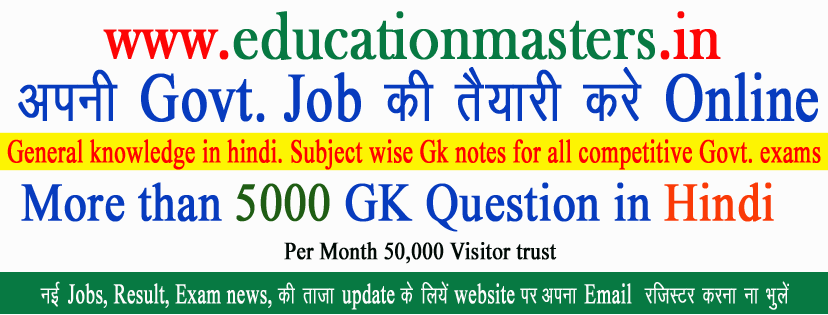
<style>
.page{position:relative;width:828px;height:315px;background:#fcfcfc}
.page>*{position:absolute;margin:0}
.t1{font:68.8px "BaskOldFace";color:#077942;font-weight:bold;scale:0.85 1}
.t2{font:68.8px "BaskOldFace";color:#fd0505;font-weight:bold;scale:0.85 1}
.t3{font:68.8px "KrutiDev010";color:#073bbe;font-weight:bold;scale:0.78 1}
.t4{font:68.8px "TimesNewRomanPSMT";color:#073bbe;font-weight:bold;scale:0.78 1}
.t5{font:32.8px "TimesNewRomanPSMT";color:#ff0000;font-weight:bold;scale:0.7 1}
.t6{font:54.1px "TimesNewRomanPSMT";color:#073bbe;font-weight:bold;scale:0.85 1}
.t7{font:54.1px "TimesNewRomanPSMT";color:#1f5d14;font-weight:bold;scale:0.85 1}
.t8{font:54.1px "TimesNewRomanPSMT";color:#fa3a07;font-weight:bold;scale:0.85 1}
.t9{font:24.6px "TimesNewRomanPSMT";color:#010a06;font-weight:bold;scale:0.85 1}
.t10{font:28.2px "TimesNewRomanPSMT";color:#fcfbfb;font-weight:bold;scale:0.67 1}
.t11{font:28.2px "KrutiDev010";color:#fcfbfb;font-weight:bold;scale:0.67 1}
</style>
<div class="page">
<p class="t1" style="left:103px;top:11px;width:618px;height:49px"><span class="t2">www.</span>educationmasters<span class="t2">.in</span></p>
<p class="t3" style="left:18px;top:67px;width:800px;height:55px">viuh <span class="t4">Govt. Job</span> dh rS;kjh djs <span class="t4">Online</span></p>
<p class="t5" style="left:7px;top:139px;width:814px;height:31px">General knowledge in hindi. Subject wise Gk notes for all competitive Govt. exams</p>
<p class="t6" style="left:21px;top:182px;width:753px;height:50px">More than <span class="t7">5000</span> GK Question in<span class="t8"> Hindi</span></p>
<p class="t9" style="left:284px;top:242px;width:273px;height:22px">Per Month 50,000 Visitor trust</p>
<p class="t10" style="left:40px;top:281px;width:749px;height:29px"><span class="t11">ubZ </span>Jobs, Result, Exam news, <span class="t11">dh rktk </span>update <span class="t11">ds fy;sa</span> website <span class="t11">ij viuk </span>Email <span class="t11"> jftLVj djuk uk Òqysa</span></p>
</div>
